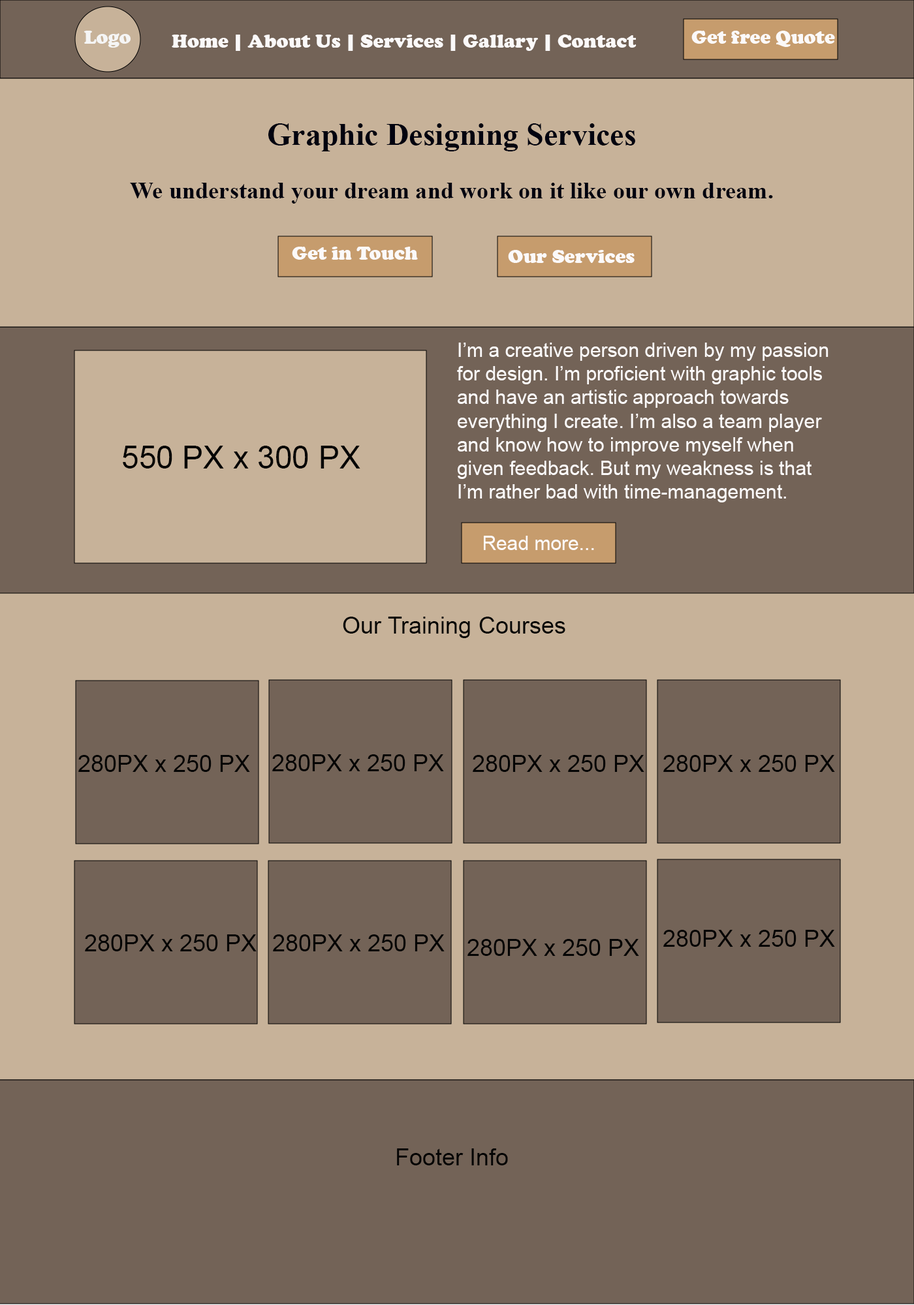
<style>
.page{position:relative;width:914px;height:1305px;background:#736357}
.page>*{position:absolute;margin:0}
.t1{font:19.6px "CooperBlack";color:#f5f5f5}
.t2{font:19.6px "CooperBlack";color:#fbf9f9}
.t3{font:31.3px "TimesNewRomanPS-BoldMT";color:#01020f}
.t4{font:23.7px "TimesNewRomanPS-BoldMT";color:#01020f}
.t5{font:19.6px "ArialMT";color:#fdfbfb}
.t6{font:31.3px "ArialMT";color:#040404}
.t7{font:23.5px "ArialMT";color:#040404}
</style>
<div class="page">
<p class="t1" style="left:84px;top:31px;width:47px;height:17px">Logo</p>
<p class="t2" style="left:172px;top:35px;width:464px;height:16px">Home | About Us | Services | Gallary | Contact</p>
<p class="t2" style="left:691px;top:31px;width:144px;height:16px">Get free Quote</p>
<p class="t3" style="left:268px;top:123px;width:367px;height:28px">Graphic Designing Services</p>
<p class="t4" style="left:130px;top:183px;width:643px;height:21px">We understand your dream and work on it like our own dream.</p>
<p class="t2" style="left:292px;top:247px;width:126px;height:13px">Get in Touch</p>
<p class="t2" style="left:508px;top:250px;width:126px;height:13px">Our Services</p>
<p class="t5" style="left:457px;top:343px;width:371px;height:159px">I’m a creative person driven by my passion for design. I’m proficient with graphic tools and have an artistic approach towards everything I create. I’m also a team player and know how to improve myself when given feedback. But my weakness is that I’m rather bad with time-management.</p>
<p class="t6" style="left:123px;top:446px;width:237px;height:23px">550 PX x 300 PX</p>
<p class="t5" style="left:484px;top:536px;width:110px;height:14px">Read more...</p>
<p class="t7" style="left:343px;top:617px;width:222px;height:21px">Our Training Courses</p>
<p class="t7" style="left:78px;top:755px;width:172px;height:17px">280PX x 250 PX</p>
<p class="t7" style="left:272px;top:754px;width:172px;height:17px">280PX x 250 PX</p>
<p class="t7" style="left:472px;top:755px;width:172px;height:17px">280PX x 250 PX</p>
<p class="t7" style="left:663px;top:755px;width:172px;height:17px">280PX x 250 PX</p>
<p class="t7" style="left:663px;top:930px;width:172px;height:17px">280PX x 250 PX</p>
<p class="t7" style="left:85px;top:935px;width:171px;height:16px">280PX x 250 PX</p>
<p class="t7" style="left:273px;top:935px;width:171px;height:16px">280PX x 250 PX</p>
<p class="t7" style="left:467px;top:939px;width:172px;height:17px">280PX x 250 PX</p>
<p class="t7" style="left:397px;top:1149px;width:111px;height:17px">Footer Info</p>
</div>
